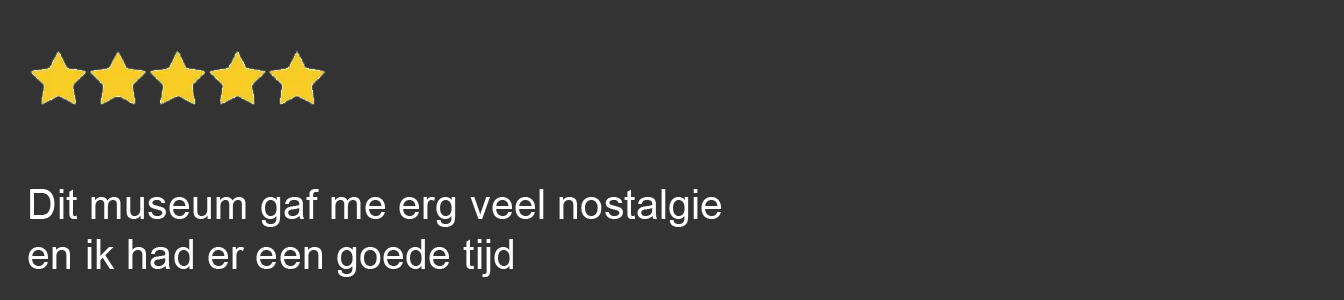
<style>
.page{position:relative;width:1344px;height:300px;background:#333333}
.page>*{position:absolute;margin:0}
.t1{font:41.5px "ArialMT";color:#ffffff}
</style>
<div class="page">
<p class="t1" style="left:28px;top:189px;width:693px;height:88px">Dit museum gaf me erg veel nostalgie <br>en ik had er een goede tijd</p>
</div>
